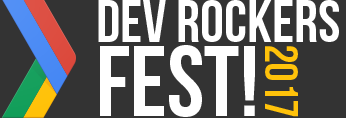
<style>
.page{position:relative;width:346px;height:118px;background:#333333}
.page>*{position:absolute;margin:0}
.t1{font:60px/74px "BebasNeue";color:#ffffff}
.t2{font:100px/74px "BebasNeue";color:#ffffff}
.t3{font:46px "BebasNeue";color:#ffc20a}
</style>
<div class="page">
<p class="t1" style="left:98px;top:0px;width:241px;height:117px">Dev Rockers<br><span class="t2">Fest!</span></p>
<p class="t3" style="left:265px;top:46px;width:33px;height:71px;rotate:90deg">2017</p>
</div>
